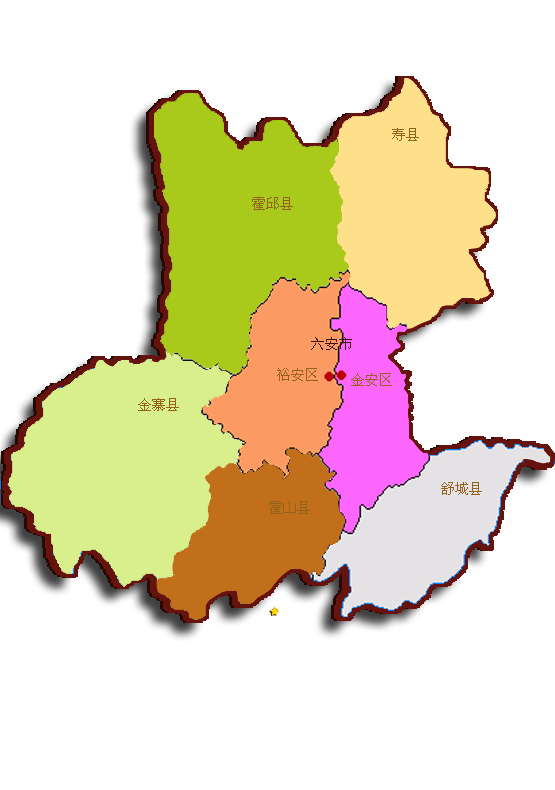
<style>
.page{position:relative;width:555px;height:790px;background:#ffffff}
.page>*{position:absolute;margin:0}
.t1{font:14px "SimSun";color:#93621b}
.t2{font:14px "SimSun";color:#3c120e}
</style>
<div class="page">
<p class="t1" style="left:392px;top:128px;width:27px;height:13px">寿县</p>
<p class="t1" style="left:252px;top:197px;width:41px;height:13px">霍邱县</p>
<p class="t2" style="left:311px;top:337px;width:41px;height:13px">六安市</p>
<p class="t1" style="left:277px;top:368px;width:41px;height:13px">裕安区</p>
<p class="t1" style="left:351px;top:373px;width:41px;height:13px">金安区</p>
<p class="t1" style="left:138px;top:398px;width:41px;height:13px">金寨县</p>
<p class="t1" style="left:441px;top:482px;width:41px;height:13px">舒城县</p>
<p class="t1" style="left:269px;top:501px;width:41px;height:13px">霍山县</p>
</div>
